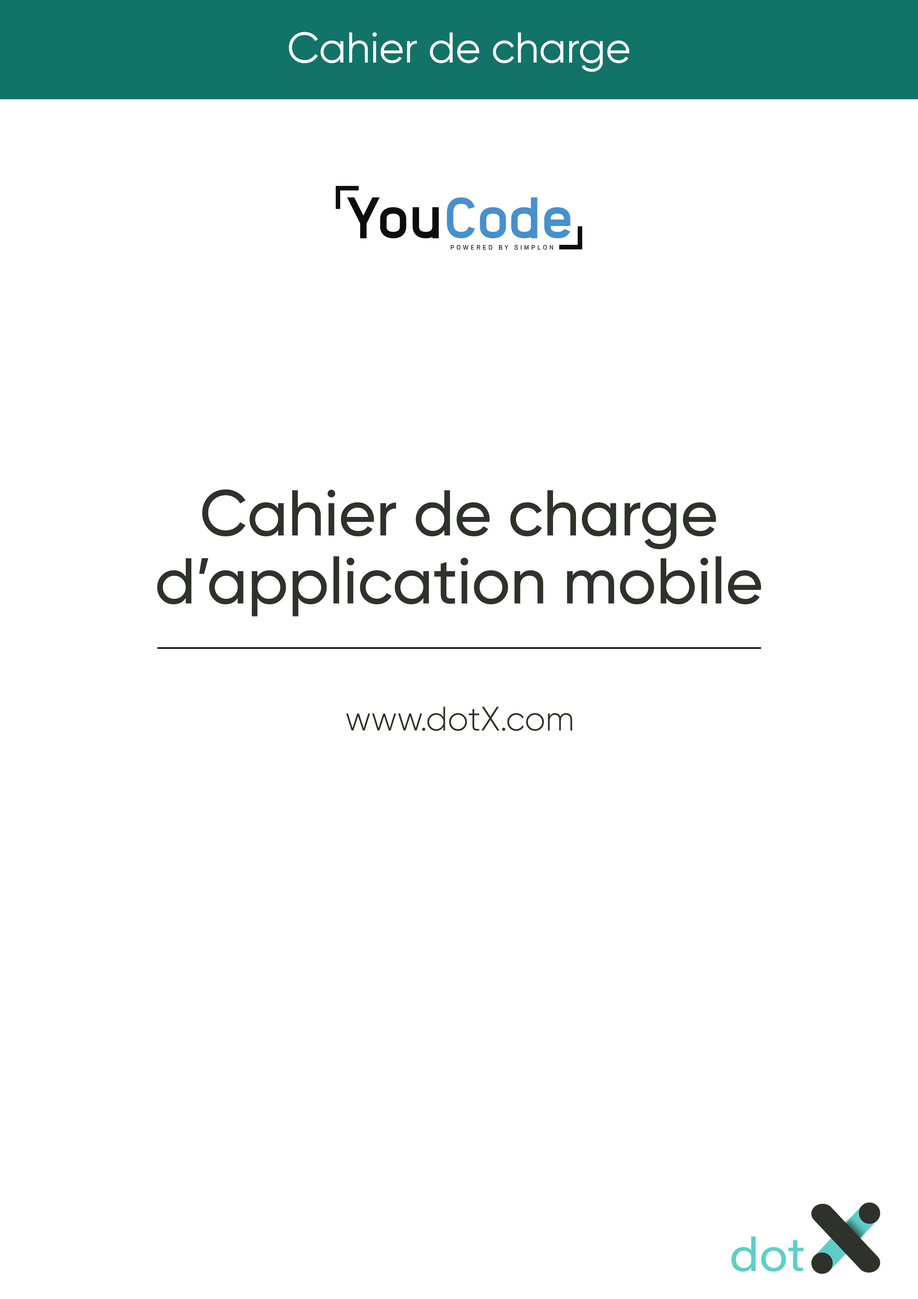
<style>
.page{position:relative;width:918px;height:1299px;background:#ffffff}
.page>*{position:absolute;margin:0}
.t1{font:42.9px "Gilroy-Regular";color:#ffffff}
.t2{font:64.5px/68px "Gilroy-Medium";color:#2f312b}
.t3{font:33.8px "Gilroy-Light";color:#2f312b}
</style>
<div class="page">
<p class="t1" style="left:289px;top:32px;width:340px;height:40px">Cahier de charge</p>
<p class="t2" style="left:157px;top:489px;width:604px;height:127px;text-align:center">Cahier de charge<br>d’application mobile</p>
<p class="t3" style="left:346px;top:706px;width:226px;height:25px">www.dotX.com</p>
</div>
